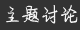
<style>
.page{position:relative;width:80px;height:30px;background:#333333}
.page>*{position:absolute;margin:0}
.t1{font:19.2px "-";color:#ffffff}
</style>
<div class="page">
<p class="t1" style="left:6px;top:4px;width:72px;height:20px">主题讨论</p>
</div>
